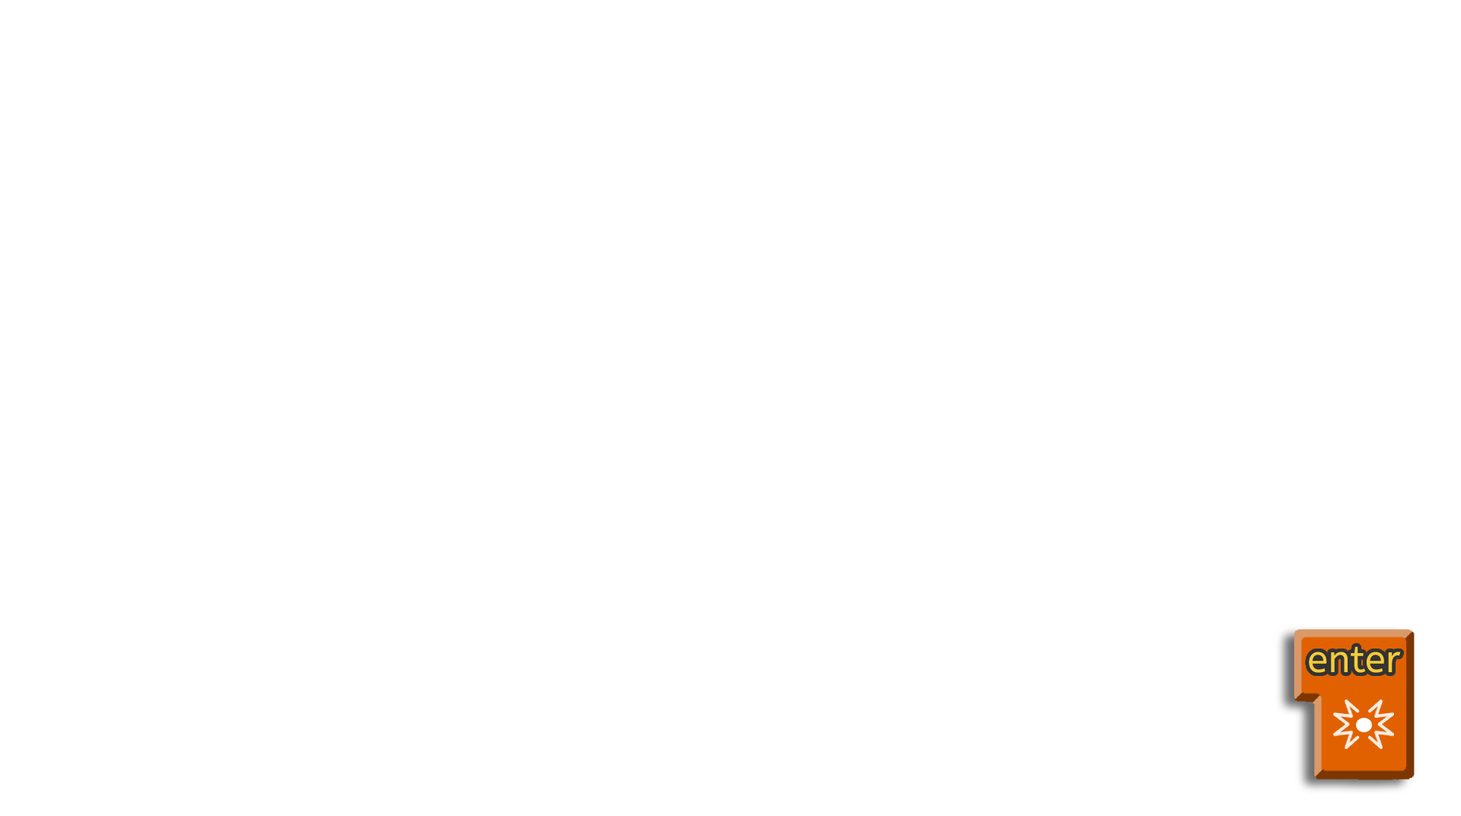
<style>
.page{position:relative;width:1461px;height:816px;background:#ffffff}
.page>*{position:absolute;margin:0}
.t1{font:38.1px "ABeeZee-Regular";color:#f6cb3b}
</style>
<div class="page">
<p class="t1" style="left:1309px;top:646px;width:92px;height:27px">enter</p>
</div>
